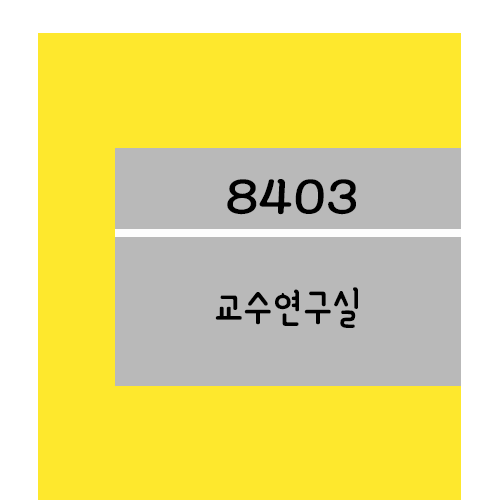
<style>
.page{position:relative;width:500px;height:500px;background:#fee82d}
.page>*{position:absolute;margin:0}
.t1{font:61.2px "YanoljaYacheR";color:#000000;scale:1.18 1}
.t2{font:48px "YanoljaYacheR";color:#000000}
</style>
<div class="page">
<p class="t1" style="left:227px;top:179px;width:129px;height:36px">8403</p>
<p class="t2" style="left:215px;top:287px;width:143px;height:41px">교수연구실</p>
</div>
